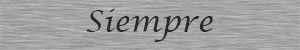
<style>
.page{position:relative;width:300px;height:50px}
.page>*{position:absolute;margin:0}
.t1{font:30px "LucidaCalligraphy-Italic";color:#282828}
</style>
<div class="page">
<p class="t1" style="left:86px;top:8px;width:127px;height:34px">Siempre</p>
</div>
